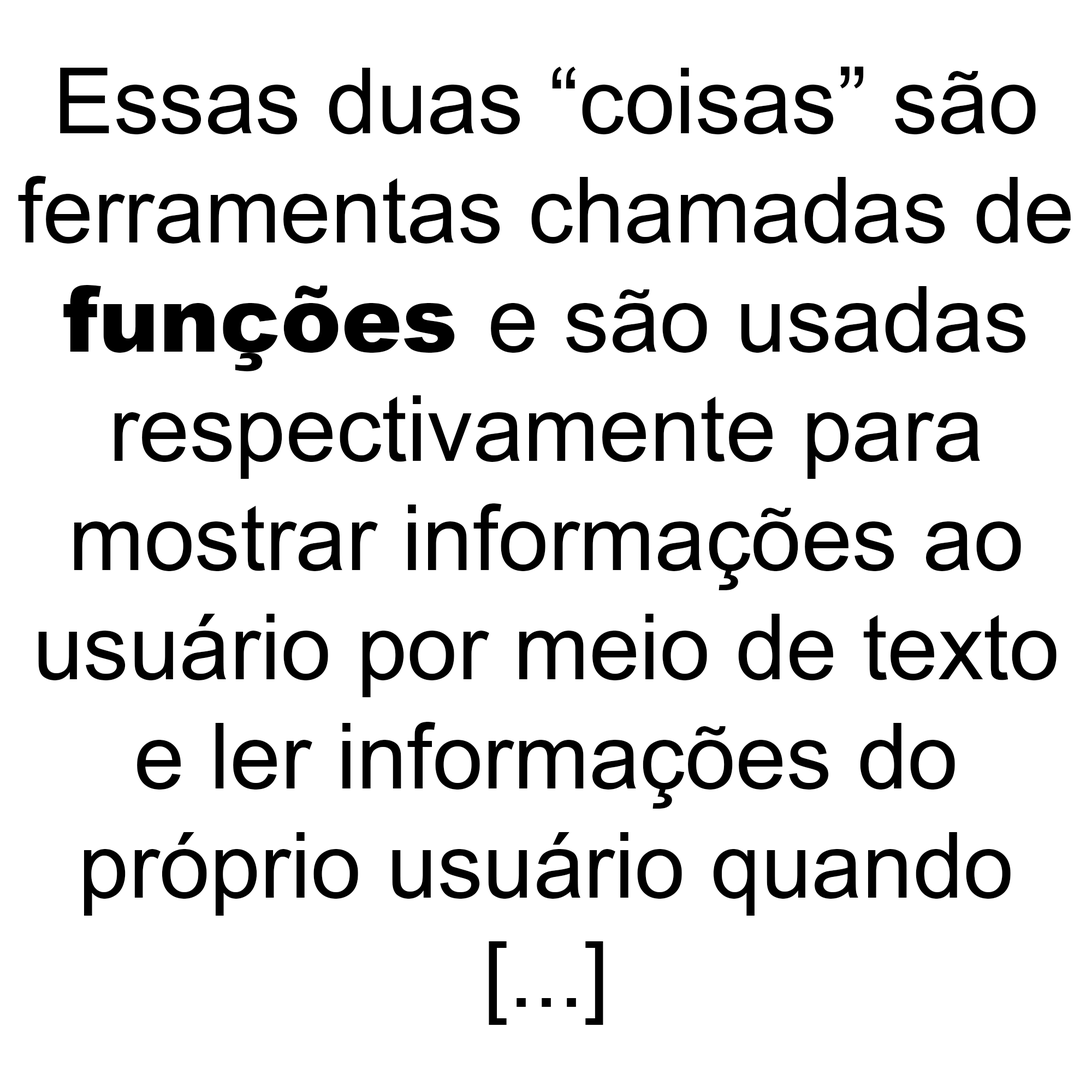
<style>
.page{position:relative;width:1092px;height:1092px;background:#ffffff}
.page>*{position:absolute;margin:0}
.t1{font:91px "ArialMT";color:#000000}
.t2{font:91px "Arial-Black";color:#000000}
</style>
<div class="page">
<p class="t1" style="left:18px;top:67px;width:1053px;height:958px;text-align:center">Essas duas “coisas” são<br>ferramentas chamadas de<br><span class="t2">funções </span>e são usadas<br>respectivamente para<br>mostrar informações ao<br>usuário por meio de texto<br>e ler informações do<br>próprio usuário quando<br>[...]</p>
</div>
